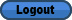
<style>
.page{position:relative;width:72px;height:20px;background:#3674be}
.page>*{position:absolute;margin:0}
.t1{font:12px "Arial-Black";color:#000000;scale:0.85 1}
</style>
<div class="page">
<p class="t1" style="left:16px;top:5px;width:39px;height:11px">Logout</p>
</div>
